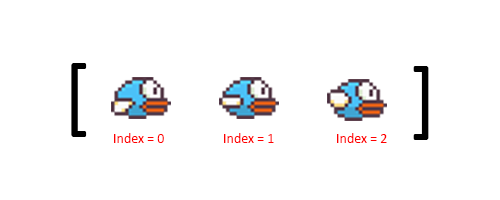
<style>
.page{position:relative;width:500px;height:200px;background:#ffffff}
.page>*{position:absolute;margin:0}
.t1{font:88.4px "Calibri";color:#000000}
.t2{font:14px "Calibri";color:#ff0000}
</style>
<div class="page">
<p class="t1" style="left:71px;top:63px;width:16px;height:74px">[</p>
<p class="t1" style="left:413px;top:66px;width:16px;height:74px;rotate:180deg">[</p>
<p class="t2" style="left:114px;top:133px;width:50px;height:10px">Index = 0</p>
<p class="t2" style="left:224px;top:133px;width:50px;height:10px">Index = 1</p>
<p class="t2" style="left:337px;top:133px;width:50px;height:10px">Index = 2</p>
</div>
